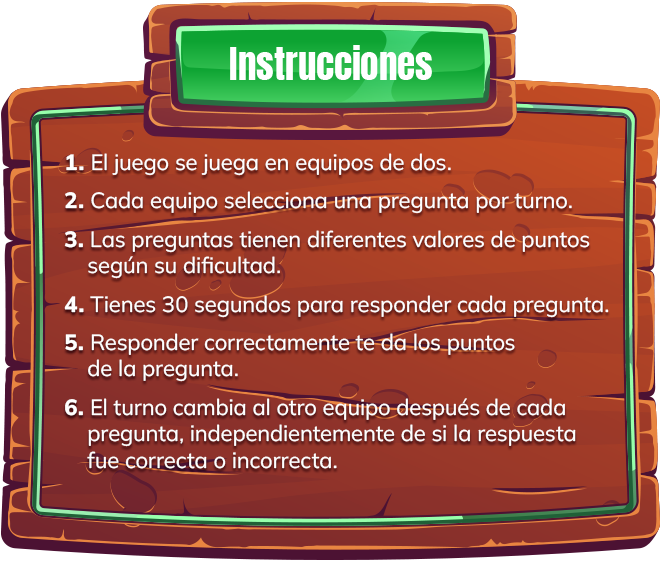
<style>
.page{position:relative;width:661px;height:561px}
.page>*{position:absolute;margin:0}
.t1{font:37px "Anton-Regular";color:#ffffff}
.t2{font:22px "MulishRoman-Regular";color:#ffffff}
.t3{font:22px "MulishRoman-ExtraBold";color:#ffffff}
</style>
<div class="page">
<p class="t1" style="left:230px;top:45px;width:202px;height:35px">Instrucciones</p>
<p class="t2" style="left:64px;top:153px;width:545px;height:316px"><span class="t3">1. </span>El juego se juega en equipos de dos.<br><br><span class="t3">2. </span>Cada equipo selecciona una pregunta por turno.<br><br><span class="t3">3. </span>Las preguntas tienen diferentes valores de puntos  <br>    según su dificultad.<br><br><span class="t3">4. </span>Tienes 30 segundos para responder cada pregunta.<br><br><span class="t3">5. </span>Responder correctamente te da los puntos<br>    de la pregunta.<br><br><span class="t3">6. </span>El turno cambia al otro equipo después de cada  <br>    pregunta, independientemente de si la respuesta<br>    fue correcta o incorrecta.</p>
</div>
